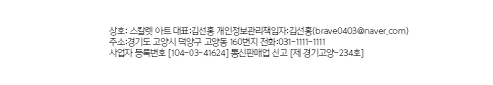
<style>
.page{position:relative;width:493px;height:85px;background:#ffffff}
.page>*{position:absolute;margin:0}
.t1{font:9px "YoonGothicPro710";color:#000000}
</style>
<div class="page">
<p class="t1" style="left:109px;top:26px;width:300px;height:32px">상호: 스칼렛 아트 대표:김선홍 개인정보관리책임자:김선홍(brave0403@naver.com) <br>주소:경기도 고양시 덕양구 고양동 160번지 전화:031-1111-1111<br>사업자 등록번호 [104-03-41624] 통신판매업 신고 [제 경기고양-234호]</p>
</div>
